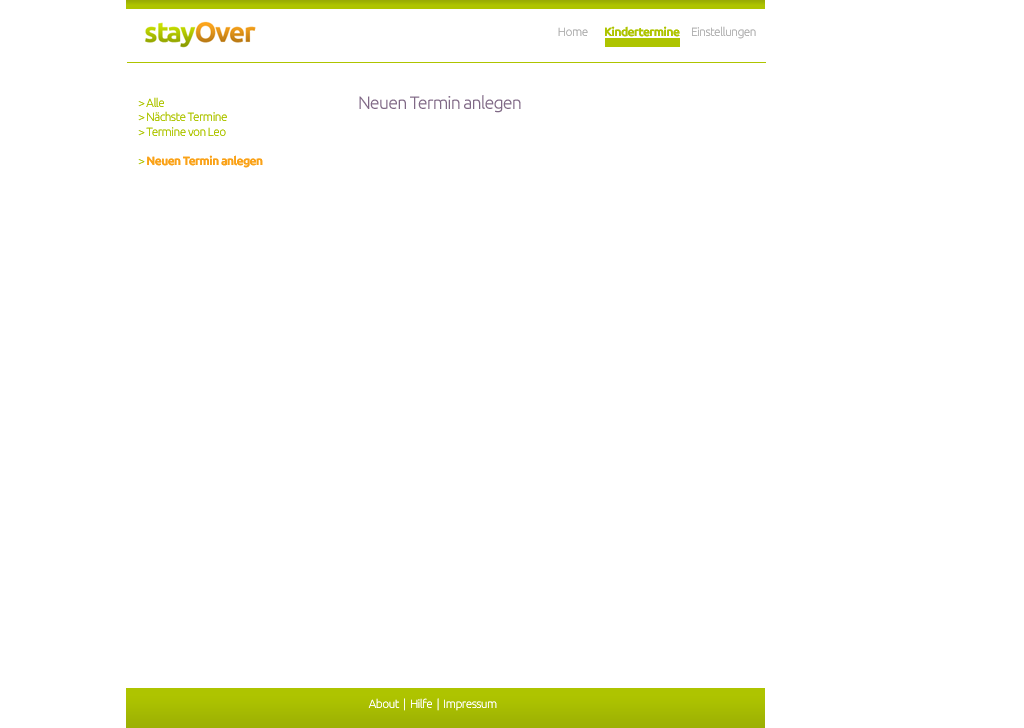
<style>
.page{position:relative;width:1024px;height:728px;background:#ffffff}
.page>*{position:absolute;margin:0}
.t1{font:12px "Ubuntu-Light";letter-spacing:-0.05em;color:#b2b2b2}
.t2{font:12px "Ubuntu-Bold";letter-spacing:-0.05em;color:#aec400}
.t3{font:12px "Ubuntu-Light";letter-spacing:-0.05em;color:#aec400}
.t4{font:12px "Ubuntu-Bold";letter-spacing:-0.05em;color:#faa218}
.t5{font:18px "Ubuntu-Light";letter-spacing:-0.05em;color:#806986}
.t6{font:12px "Ubuntu-Light";letter-spacing:-0.05em;color:#ffffff}
</style>
<div class="page">
<p class="t1" style="left:558px;top:27px;width:30px;height:9px">Home</p>
<p class="t2" style="left:605px;top:26px;width:75px;height:11px">Kindertermine</p>
<p class="t1" style="left:692px;top:26px;width:64px;height:13px">Einstellungen</p>
<p class="t3" style="left:138px;top:97px;width:125px;height:71px">&gt; Alle<br>&gt; Nächste Termine<br>&gt; Termine von Leo<br><br>&gt; <span class="t4">Neuen Termin anlegen</span></p>
<p class="t5" style="left:359px;top:95px;width:162px;height:18px">Neuen Termin anlegen</p>
<p class="t6" style="left:368px;top:698px;width:129px;height:13px">About  |  Hilfe  |  Impressum</p>
</div>
